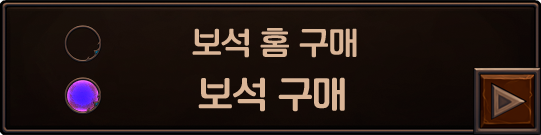
<style>
.page{position:relative;width:541px;height:135px}
.page>*{position:absolute;margin:0}
.t1{font:30px "KoreanNGL3-R";color:#dab597}
.t2{font:35px "KoreanNGL3-R";color:#dab597}
</style>
<div class="page">
<p class="t1" style="left:192px;top:28px;width:165px;height:30px">보석 홈 구매</p>
<p class="t2" style="left:198px;top:77px;width:147px;height:35px">보석 구매</p>
</div>
